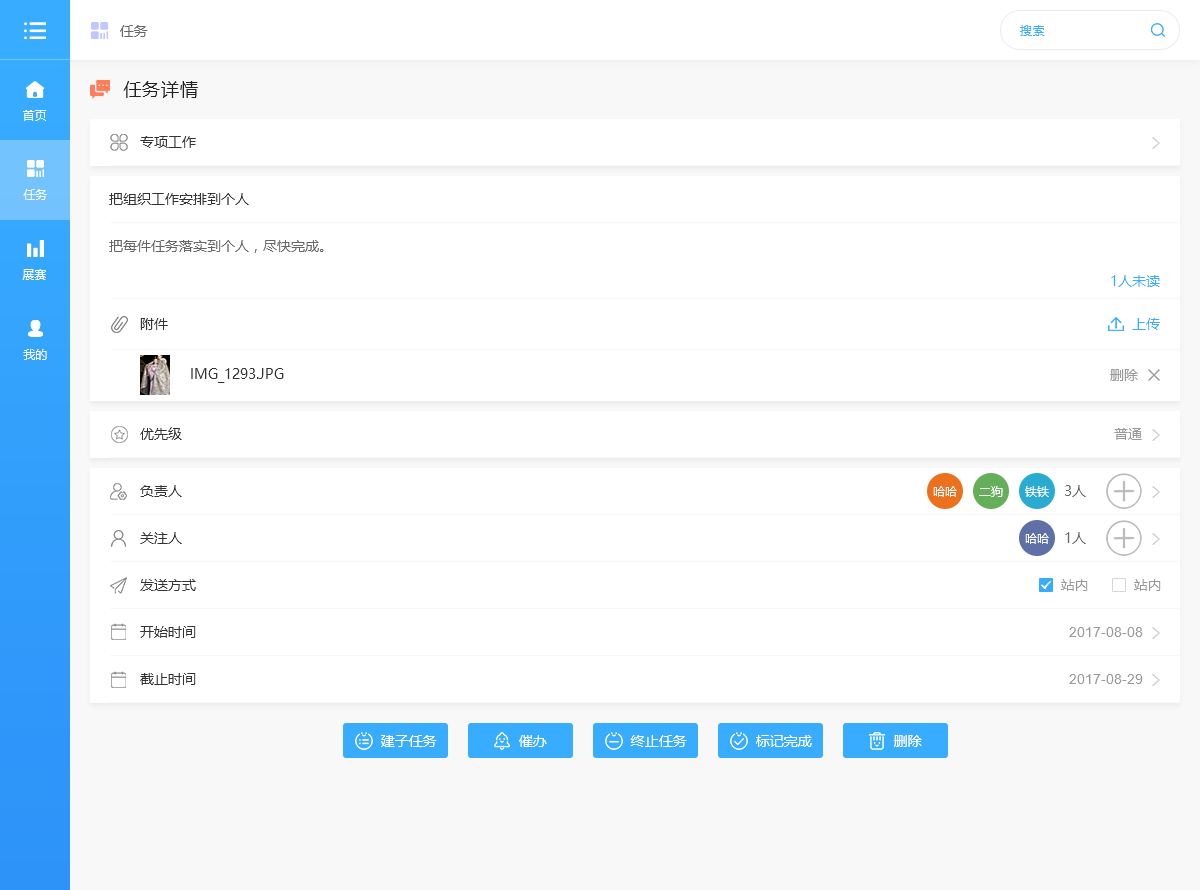
<style>
.page{position:relative;width:1200px;height:890px;background:#ffffff}
.page>*{position:absolute;margin:0}
.t1{font:14px "MicrosoftYaHei";color:#666666}
.t2{font:12px "MicrosoftYaHei";letter-spacing:0.05em;color:#38adff}
.t3{font:18px "MicrosoftYaHei";letter-spacing:0.05em;color:#222222}
.t4{font:12px "MicrosoftYaHei";color:#ffffff}
.t5{font:14px "MicrosoftYaHei";color:#333333}
.t6{font:14px "MicrosoftYaHei";color:#38adff}
.t7{font:14px "MicrosoftYaHei";color:#999999}
.t8{font:14px "ArialMT";color:#999999}
.t9{font:14px "MicrosoftYaHei";color:#ffffff}
</style>
<div class="page">
<p class="t1" style="left:120px;top:25px;width:28px;height:12px">任务</p>
<p class="t2" style="left:1020px;top:25px;width:25px;height:11px">搜索</p>
<p class="t3" style="left:123px;top:81px;width:75px;height:17px">任务详情</p>
<p class="t4" style="left:23px;top:110px;width:24px;height:11px">首页</p>
<p class="t5" style="left:140px;top:136px;width:56px;height:12px">专项工作</p>
<p class="t4" style="left:23px;top:189px;width:24px;height:11px">任务</p>
<p class="t5" style="left:109px;top:193px;width:140px;height:12px">把组织工作安排到个人</p>
<p class="t1" style="left:109px;top:240px;width:215px;height:13px">把每件任务落实到个人，尽快完成。</p>
<p class="t4" style="left:22px;top:269px;width:24px;height:11px">展赛</p>
<p class="t6" style="left:1111px;top:275px;width:49px;height:12px">1人未读</p>
<p class="t5" style="left:140px;top:318px;width:28px;height:12px">附件</p>
<p class="t6" style="left:1132px;top:318px;width:28px;height:12px">上传</p>
<p class="t4" style="left:23px;top:349px;width:24px;height:11px">我的</p>
<p class="t5" style="left:191px;top:368px;width:93px;height:15px">IMG_1293.JPG</p>
<p class="t7" style="left:1110px;top:369px;width:28px;height:12px">删除</p>
<p class="t5" style="left:140px;top:427px;width:42px;height:13px">优先级</p>
<p class="t7" style="left:1114px;top:428px;width:28px;height:12px">普通</p>
<p class="t5" style="left:140px;top:485px;width:42px;height:12px">负责人</p>
<p class="t4" style="left:933px;top:486px;width:24px;height:11px">哈哈</p>
<p class="t4" style="left:979px;top:486px;width:24px;height:11px">二狗</p>
<p class="t4" style="left:1025px;top:486px;width:24px;height:11px">铁铁</p>
<p class="t1" style="left:1065px;top:485px;width:21px;height:12px">3人</p>
<p class="t5" style="left:140px;top:532px;width:42px;height:12px">关注人</p>
<p class="t4" style="left:1025px;top:533px;width:24px;height:11px">哈哈</p>
<p class="t1" style="left:1065px;top:532px;width:21px;height:12px">1人</p>
<p class="t5" style="left:140px;top:579px;width:56px;height:12px">发送方式</p>
<p class="t7" style="left:1061px;top:579px;width:27px;height:12px">站内</p>
<p class="t7" style="left:1134px;top:579px;width:27px;height:12px">站内</p>
<p class="t5" style="left:140px;top:626px;width:56px;height:12px">开始时间</p>
<p class="t8" style="left:1069px;top:627px;width:74px;height:10px">2017-08-08</p>
<p class="t5" style="left:140px;top:673px;width:56px;height:12px">截止时间</p>
<p class="t8" style="left:1069px;top:674px;width:74px;height:10px">2017-08-29</p>
<p class="t9" style="left:381px;top:735px;width:56px;height:12px">建子任务</p>
<p class="t9" style="left:519px;top:735px;width:28px;height:12px">催办</p>
<p class="t9" style="left:630px;top:735px;width:57px;height:12px">终止任务</p>
<p class="t9" style="left:756px;top:735px;width:56px;height:12px">标记完成</p>
<p class="t9" style="left:893px;top:735px;width:29px;height:12px">删除</p>
</div>
